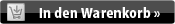
<style>
.page{position:relative;width:175px;height:24px;background:#4d4d4d}
.page>*{position:absolute;margin:0}
.t1{font:13px "KozGoPro-Heavy";letter-spacing:0.01em;color:#fefefe}
</style>
<div class="page">
<p class="t1" style="left:39px;top:7px;width:121px;height:11px">In den Warenkorb »</p>
</div>
